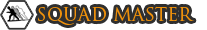
<style>
.page{position:relative;width:207px;height:30px;background:#ffffff}
.page>*{position:absolute;margin:0}
.t1{font:18px "TrajanPro-Regular";color:#ef910b}
</style>
<div class="page">
<p class="t1" style="left:38px;top:6px;width:156px;height:19px">SQUAD MASTER</p>
</div>
